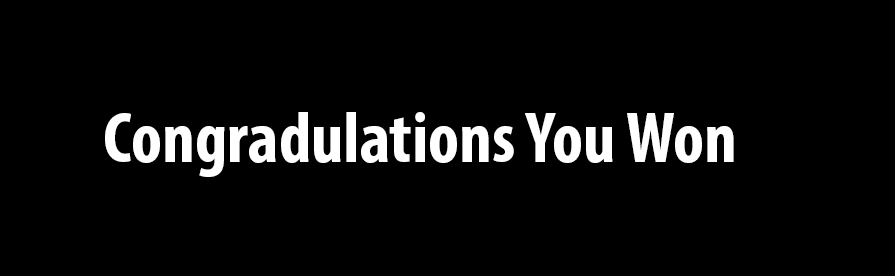
<style>
.page{position:relative;width:895px;height:276px;background:#000000}
.page>*{position:absolute;margin:0}
.t1{font:72px "MyriadPro-BoldCond";color:#ffffff}
</style>
<div class="page">
<p class="t1" style="left:105px;top:112px;width:629px;height:65px">Congradulations You Won</p>
</div>
